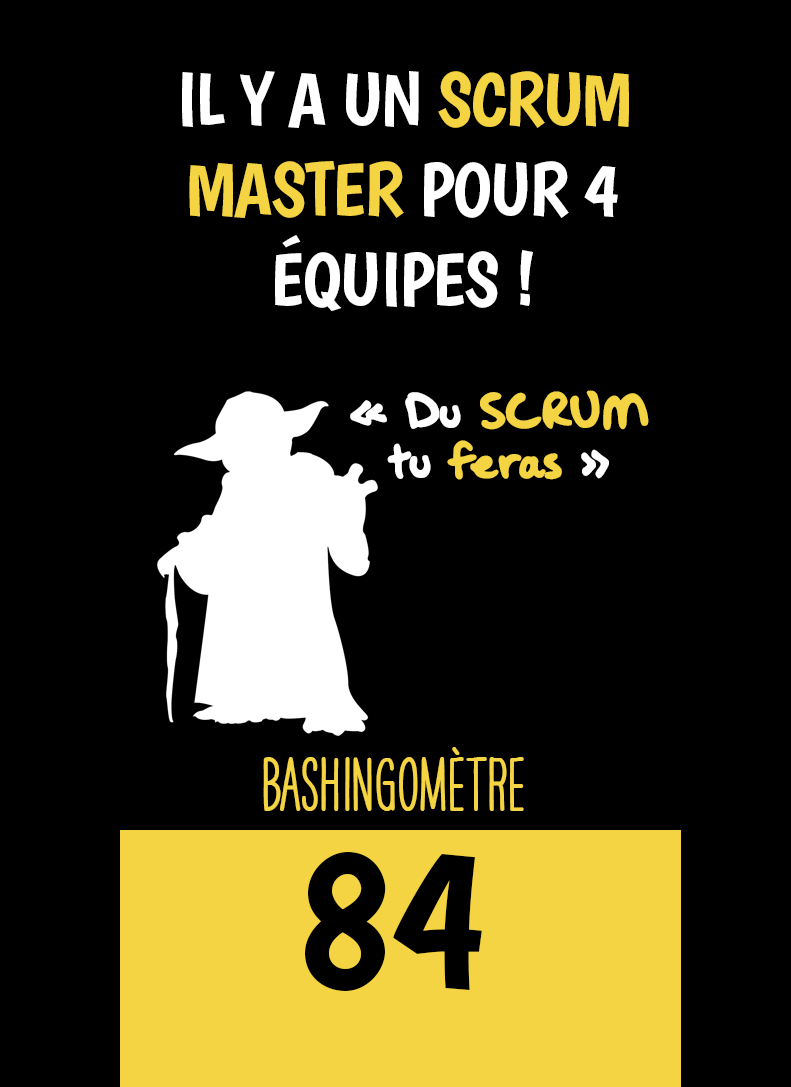
<style>
.page{position:relative;width:791px;height:1087px;background:#000000}
.page>*{position:absolute;margin:0}
.t1{font:75px "Boogaloo-Regular";letter-spacing:-0.02em;color:#ffffff}
.t2{font:75px "Boogaloo-Regular";letter-spacing:-0.02em;color:#f4d443}
.t3{font:58.3px/50px "OakStreetW01-Regular";color:#f4d443}
.t4{font:58.3px/50px "OakStreetW01-Regular";color:#ffffff}
.t5{font:66.7px "HAVEANICEDAYTallW04-Bold";color:#f4d443}
.t6{font:200px "Boogaloo-Regular";color:#000000}
</style>
<div class="page">
<p class="t1" style="left:182px;top:71px;width:447px;height:240px;text-align:center">IL Y A UN <span class="t2">SCRUM MASTER</span> POUR 4 ÉQUIPES !</p>
<p class="t3" style="left:350px;top:390px;width:299px;height:90px;text-align:center"><span class="t4">« Du </span>SCRUM<br><span class="t4">tu </span>feras<span class="t4"> »</span></p>
<p class="t5" style="left:263px;top:747px;width:261px;height:64px">BASHINgomètre</p>
<p class="t6" style="left:305px;top:852px;width:177px;height:139px">84</p>
</div>
